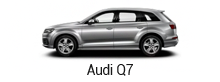
<style>
.page{position:relative;width:220px;height:82px;background:#ffffff}
.page>*{position:absolute;margin:0}
.t1{font:14px "Roboto-Regular";letter-spacing:-0.05em;color:#191919}
</style>
<div class="page">
<p class="t1" style="left:87px;top:64px;width:46px;height:12px">Audi Q7</p>
</div>
